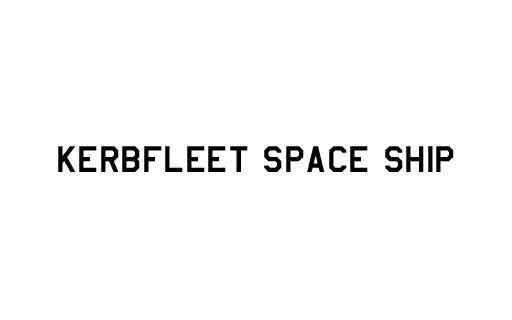
<style>
.page{position:relative;width:512px;height:320px;background:#ffffff}
.page>*{position:absolute;margin:0}
.t1{font:43px "AmarilloUSAF";color:#000000}
</style>
<div class="page">
<p class="t1" style="left:58px;top:146px;width:396px;height:26px">KERBFLEET SPACE SHIP</p>
</div>
